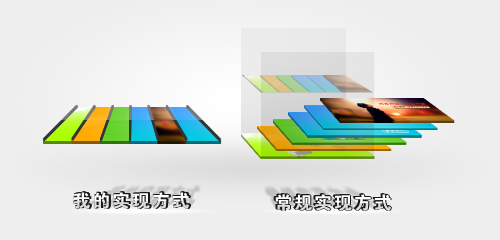
<style>
.page{position:relative;width:500px;height:240px;background:#eeeeee}
.page>*{position:absolute;margin:0}
.t1{font:18px "FZDHTJW--GB1-0";letter-spacing:0.1em}
</style>
<div class="page">
<p class="t1" style="left:73px;top:192px;width:116px;height:17px">我的实现方式</p>
<p class="t1" style="left:275px;top:194px;width:116px;height:17px">常规实现方式</p>
</div>
